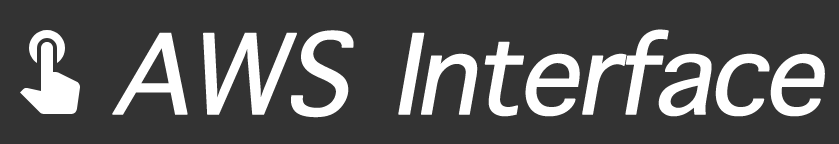
<style>
.page{position:relative;width:839px;height:144px;background:#333333}
.page>*{position:absolute;margin:0}
.t1{font:150px "AppleSymbols";letter-spacing:-0.05em;color:#ffffff;font-weight:bold;font-style:italic}
</style>
<div class="page">
<p class="t1" style="left:112px;top:29px;width:713px;height:89px">AWS Interface</p>
</div>
